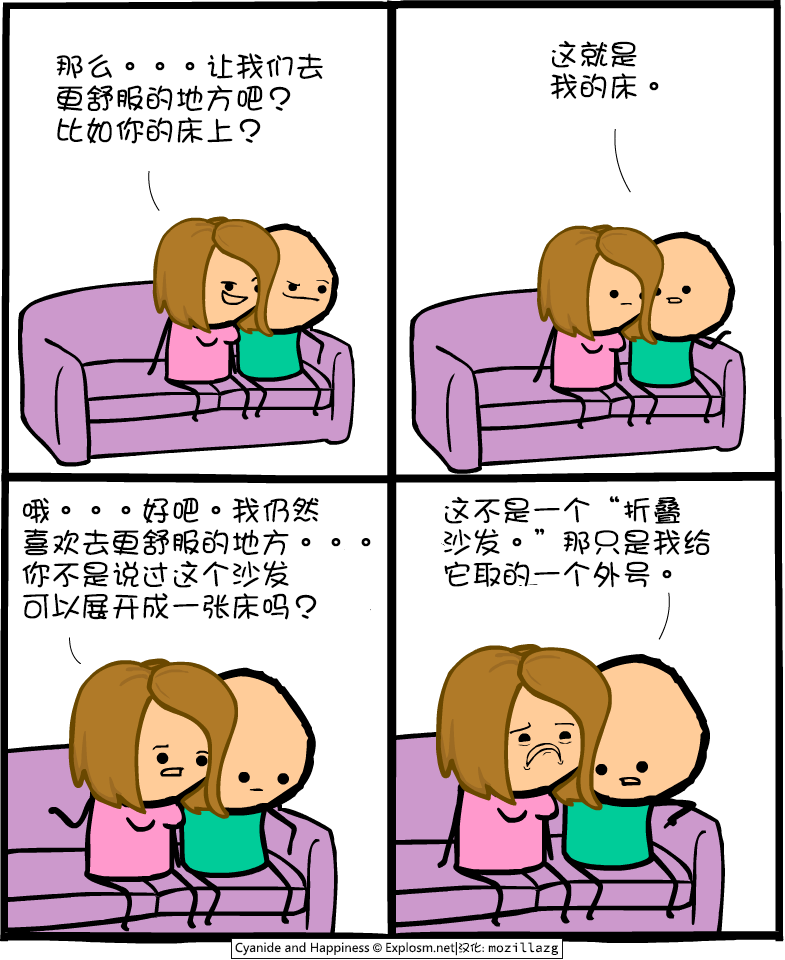
<style>
.page{position:relative;width:785px;height:960px;background:#ffffff}
.page>*{position:absolute;margin:0}
.t1{font:30px/32px "DFGirl";color:#000000}
</style>
<div class="page">
<p class="t1" style="left:550px;top:40px;width:109px;height:59px">这就是<br>我的床。</p>
<p class="t1" style="left:56px;top:53px;width:267px;height:91px">那么。。。让我们去<br>更舒服的地方吧？<br>比如你的床上？</p>
<p class="t1" style="left:22px;top:497px;width:349px;height:123px">哦。。。好吧。我仍然<br>喜欢去更舒服的地方。。。<br>你不是说过这个沙发<br>可以展开成一张床吗？</p>
<p class="t1" style="left:443px;top:496px;width:267px;height:92px">这不是一个“折叠<br>沙发。”那只是我给<br>它取的一个外号。</p>
</div>
